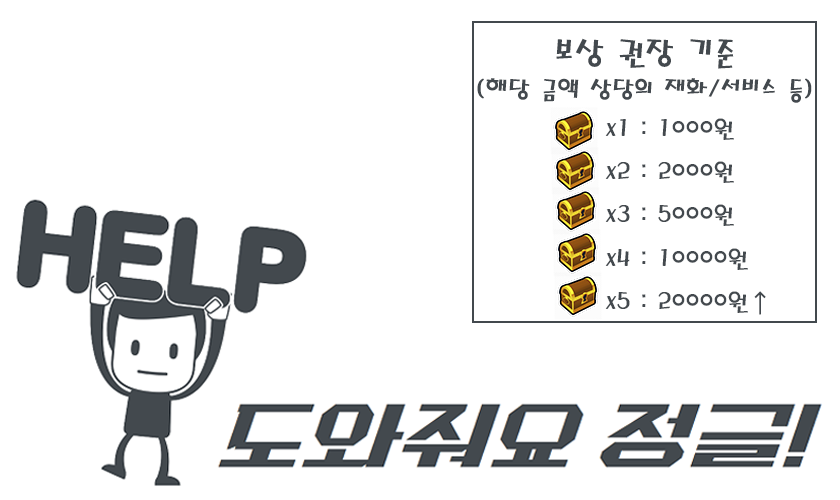
<style>
.page{position:relative;width:840px;height:500px;background:#ffffff}
.page>*{position:absolute;margin:0}
.t1{font:33.3px "MagicR-HM";color:#43494e}
.t2{font:25px "MagicR-HM";color:#43494e}
.t3{font:25px/43.3px "MagicR-HM";color:#43494e}
</style>
<div class="page">
<p class="t1" style="left:556px;top:38px;width:178px;height:31px">보상 권장 기준</p>
<p class="t2" style="left:477px;top:78px;width:335px;height:25px">(해당 금액 상당의 재화/서비스 등)</p>
<p class="t3" style="left:605px;top:118px;width:161px;height:197px">x1 : 1000원<br>x2 : 2000원<br>x3 : 5000원<br>x4 : 10000원<br>x5 : 20000원↑</p>
</div>
